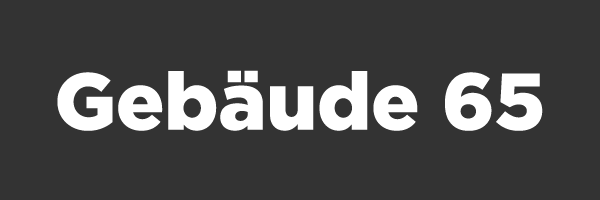
<style>
.page{position:relative;width:600px;height:200px;background:#333333}
.page>*{position:absolute;margin:0}
.t1{font:80px "Gotham-Black";color:#ffffff}
</style>
<div class="page">
<p class="t1" style="left:57px;top:70px;width:486px;height:61px">Gebäude 65</p>
</div>
